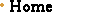
<style>
.page{position:relative;width:90px;height:14px;background:#ffffff}
.page>*{position:absolute;margin:0}
.t1{font:18px "Perpetua";color:#000000;font-weight:bold}
.t2{font:18px "Perpetua";color:#d99c3c}
</style>
<div class="page">
<p class="t1" style="left:0px;top:0px;width:52px;height:12px"><span class="t2">• </span>Home</p>
</div>
